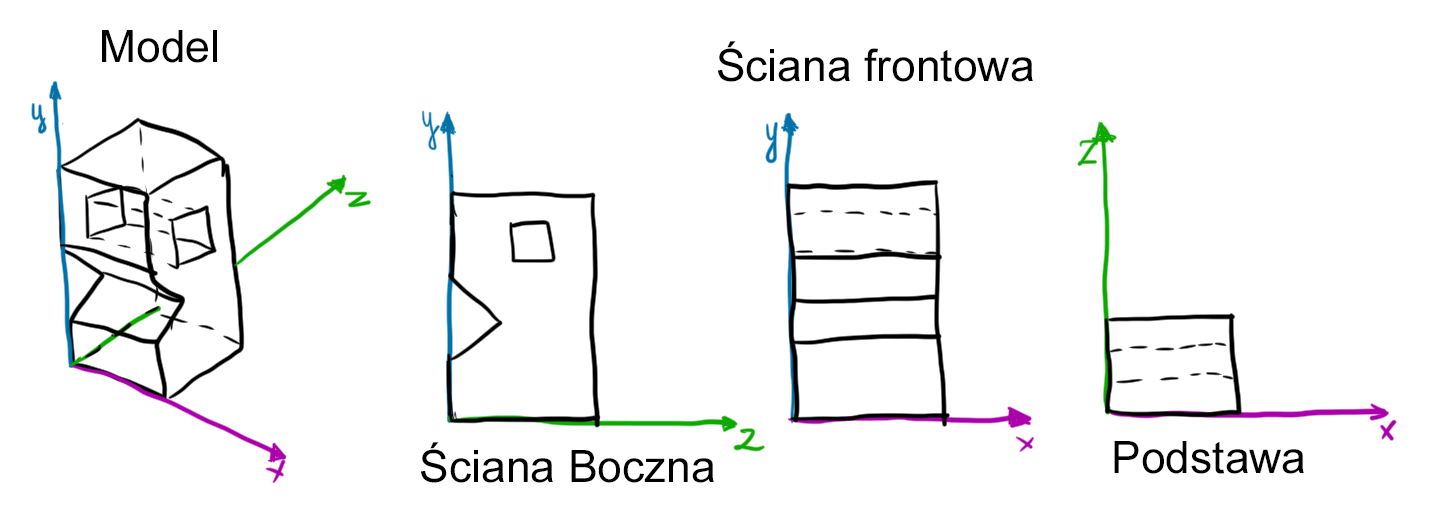
<style>
.page{position:relative;width:1430px;height:510px;background:#ffffff}
.page>*{position:absolute;margin:0}
.t1{font:44.4px "ArialMT";color:#000000}
</style>
<div class="page">
<p class="t1" style="left:102px;top:30px;width:115px;height:33px">Model</p>
<p class="t1" style="left:718px;top:41px;width:315px;height:41px">Ściana frontowa</p>
<p class="t1" style="left:421px;top:442px;width:293px;height:41px">Ściana Boczna</p>
<p class="t1" style="left:1114px;top:441px;width:190px;height:33px">Podstawa</p>
</div>
